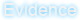
<style>
.page{position:relative;width:80px;height:20px}
.page>*{position:absolute;margin:0}
.t1{font:18px "ArialMT";color:#f2f2f2}
</style>
<div class="page">
<p class="t1" style="left:4px;top:3px;width:73px;height:13px">Evidence</p>
</div>
